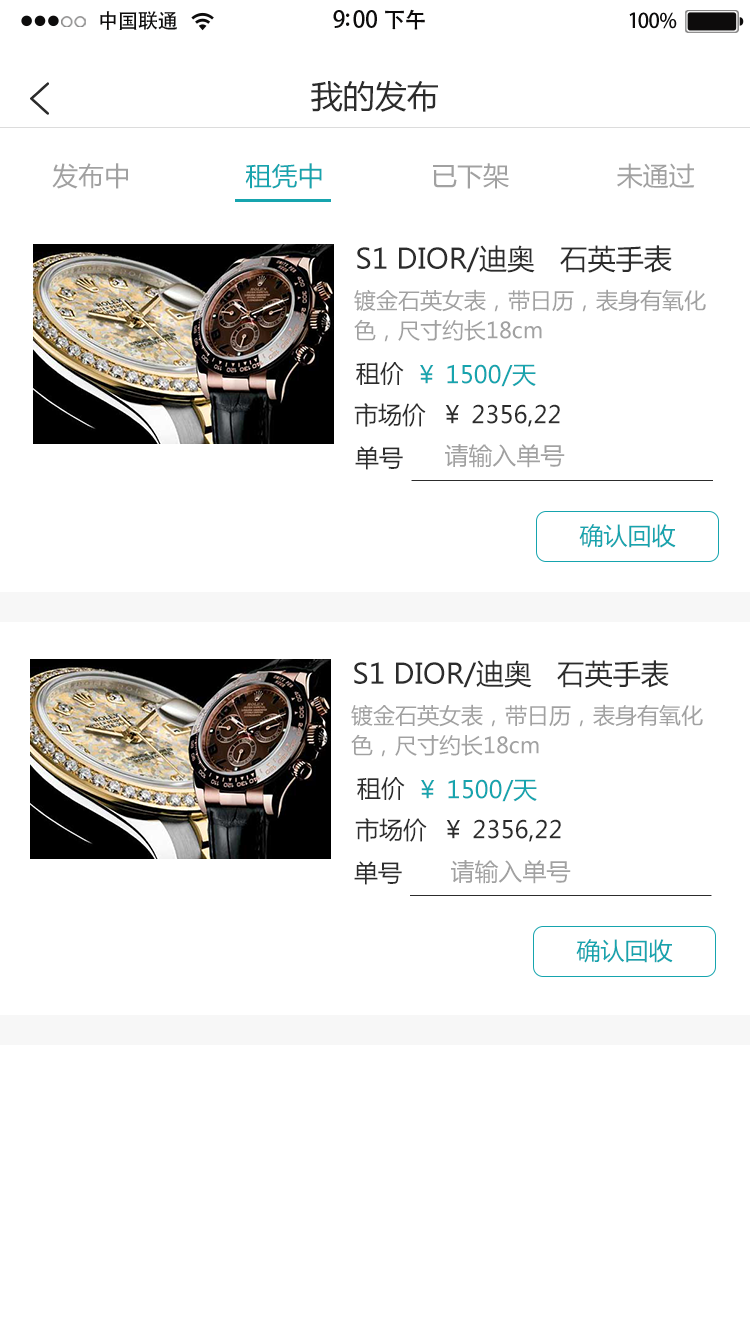
<style>
.page{position:relative;width:750px;height:1334px;background:#ffffff}
.page>*{position:absolute;margin:0}
.t1{font:20.4px "AdobeHeitiStd-Regular";letter-spacing:-0.02em;color:#000000}
.t2{font:23px "AdobeHeitiStd-Regular";letter-spacing:-0.02em;color:#000000}
.t3{font:22px "AdobeHeitiStd-Regular";letter-spacing:-0.02em;color:#000000}
.t4{font:20.4px "AdobeHeitiStd-Regular";letter-spacing:-0.02em;color:#010101}
.t5{font:32px "MicrosoftYaHei";color:#2c2c2c}
.t6{font:26px "MicrosoftYaHei";color:#a1a1a1}
.t7{font:26px "MicrosoftYaHei";color:#16a4ae}
.t8{font:28px "MicrosoftYaHei";color:#2c2c2c}
.t9{font:22px/15px "MicrosoftYaHei";color:#a1a1a1}
.t10{font:24px "MicrosoftYaHei";color:#2c2c2c}
.t11{font:24px "MicrosoftYaHei";color:#16a4ae}
.t12{font:24px "MicrosoftYaHei";color:#a1a1a1}
.t13{font:22px "MicrosoftYaHei";color:#a1a1a1}
</style>
<div class="page">
<p class="t1" style="left:100px;top:11px;width:77px;height:19px">中国联通</p>
<p class="t2" style="left:333px;top:9px;width:92px;height:21px">9:00 <span class="t3">下午</span></p>
<p class="t4" style="left:629px;top:12px;width:48px;height:17px">100%</p>
<p class="t5" style="left:311px;top:80px;width:127px;height:32px">我的发布</p>
<p class="t6" style="left:52px;top:163px;width:643px;height:26px">发布中               <span class="t7">租凭中      </span>        已下架              未通过</p>
<p class="t8" style="left:357px;top:245px;width:315px;height:28px">S1 DIOR/迪奥   石英手表</p>
<p class="t9" style="left:354px;top:289px;width:352px;height:53px">镀金石英女表，带日历，表身有氧化<br><br>色，尺寸约长18cm</p>
<p class="t10" style="left:356px;top:362px;width:48px;height:24px">租价</p>
<p class="t11" style="left:420px;top:364px;width:116px;height:23px">￥ 1500/天</p>
<p class="t10" style="left:354px;top:403px;width:206px;height:24px">市场价  ￥ 2356,22</p>
<p class="t10" style="left:355px;top:446px;width:48px;height:24px">单号</p>
<p class="t12" style="left:445px;top:444px;width:120px;height:24px"><span class="t13"> </span> 请输入单号</p>
<p class="t11" style="left:579px;top:524px;width:97px;height:24px">确认回收</p>
<p class="t8" style="left:354px;top:660px;width:315px;height:28px">S1 DIOR/迪奥   石英手表</p>
<p class="t9" style="left:351px;top:704px;width:352px;height:53px">镀金石英女表，带日历，表身有氧化<br><br>色，尺寸约长18cm</p>
<p class="t10" style="left:357px;top:777px;width:48px;height:24px">租价</p>
<p class="t11" style="left:421px;top:779px;width:116px;height:23px">￥ 1500/天</p>
<p class="t10" style="left:355px;top:818px;width:206px;height:24px">市场价  ￥ 2356,22</p>
<p class="t10" style="left:354px;top:861px;width:48px;height:24px">单号</p>
<p class="t12" style="left:451px;top:860px;width:120px;height:24px"><span class="t13"> </span> 请输入单号</p>
<p class="t11" style="left:576px;top:939px;width:97px;height:24px">确认回收</p>
</div>
